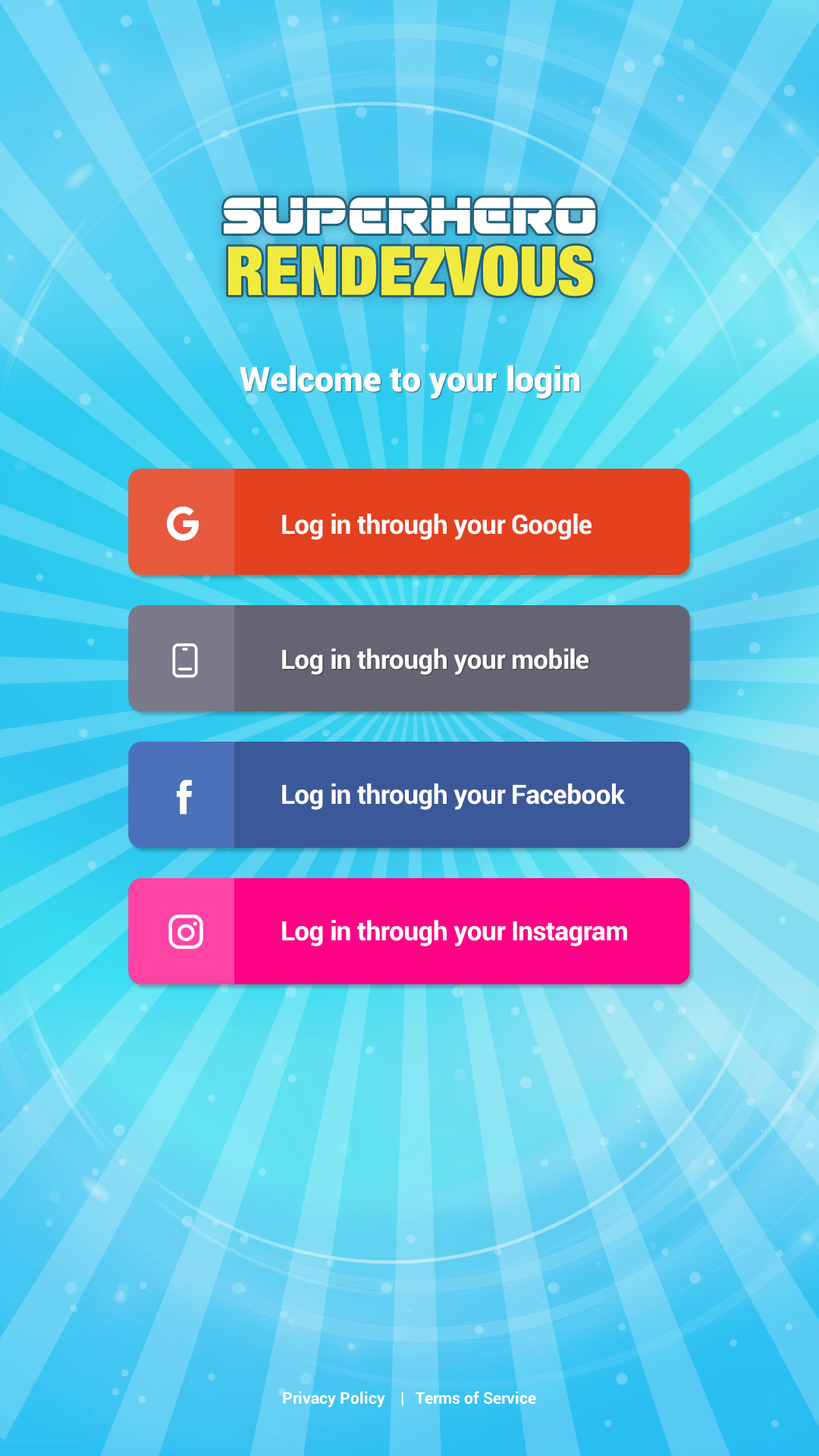
<style>
.page{position:relative;width:819px;height:1456px}
.page>*{position:absolute;margin:0}
.t1{font:34.1px "Roboto-Black";color:#ffffff}
.t2{font:26.5px "Roboto-Bold";letter-spacing:-0.02em;color:#ffffff}
.t3{font:15.9px "Roboto-Bold";color:#ffffff}
</style>
<div class="page">
<p class="t1" style="left:240px;top:365px;width:340px;height:34px">Welcome to your login</p>
<p class="t2" style="left:282px;top:513px;width:309px;height:27px">Log in through your Google</p>
<p class="t2" style="left:282px;top:648px;width:306px;height:27px">Log in through your mobile</p>
<p class="t2" style="left:282px;top:783px;width:343px;height:27px">Log in through your Facebook</p>
<p class="t2" style="left:282px;top:920px;width:345px;height:26px">Log in through your Instagram</p>
<p class="t3" style="left:283px;top:1391px;width:253px;height:16px">Privacy Policy    |   Terms of Service</p>
</div>
